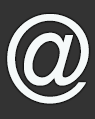
<style>
.page{position:relative;width:95px;height:119px;background:#333333}
.page>*{position:absolute;margin:0}
.t1{font:120px "Avenir-Roman";letter-spacing:0.025em;color:#f5f9f9;text-transform:uppercase;scale:0.95 1}
</style>
<div class="page">
<p class="t1" style="left:7px;top:14px;width:82px;height:90px">@</p>
</div>
